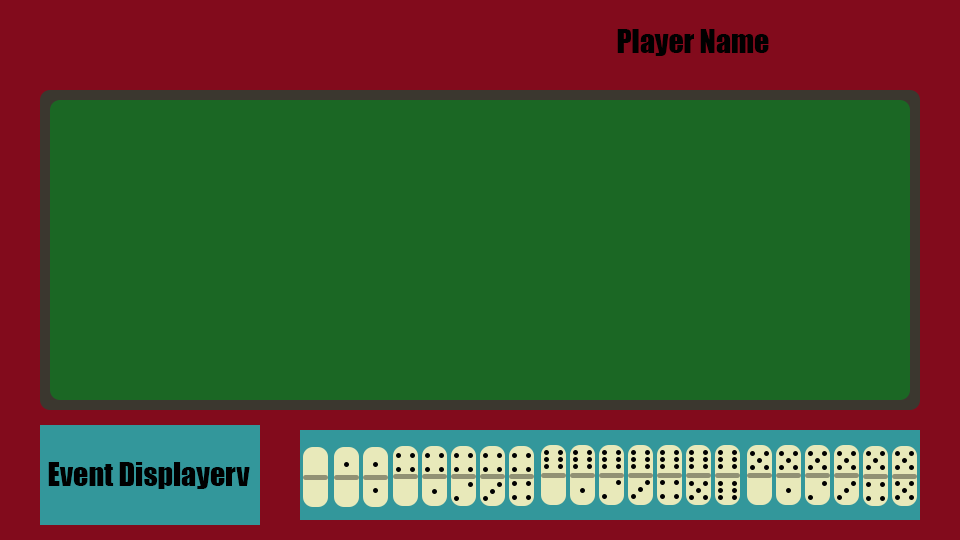
<style>
.page{position:relative;width:960px;height:540px;background:#1b6724}
.page>*{position:absolute;margin:0}
.t1{font:30px "Impact";color:#000000}
</style>
<div class="page">
<p class="t1" style="left:617px;top:29px;width:152px;height:27px">Player Name</p>
<p class="t1" style="left:48px;top:462px;width:202px;height:27px">Event Displayerv</p>
</div>
